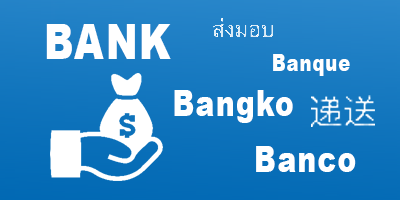
<style>
.page{position:relative;width:400px;height:200px}
.page>*{position:absolute;margin:0}
.t1{font:49.4px "Arial-Black";letter-spacing:0.05em;color:#ffffff;scale:0.77 1}
.t2{font:23.4px "Arial-Black";letter-spacing:0.05em;color:#ffffff;scale:0.77 1}
.t3{font:36.4px "Arial-Black";letter-spacing:0.05em;color:#ffffff;scale:0.77 1}
</style>
<div class="page">
<p class="t1" style="left:46px;top:24px;width:125px;height:35px">BANK</p>
<p class="t2" style="left:273px;top:54px;width:77px;height:22px">Banque</p>
<p class="t3" style="left:174px;top:90px;width:119px;height:33px">Bangko</p>
<p class="t3" style="left:256px;top:146px;width:100px;height:26px">Banco</p>
</div>
